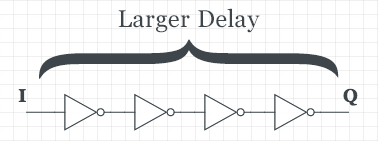
<style>
.page{position:relative;width:378px;height:141px;background:#ffffff}
.page>*{position:absolute;margin:0}
.t1{font:24px "Georgia";letter-spacing:0.02em;color:#3e464b}
.t2{font:322.1px "Helvetica-Light";letter-spacing:0.02em;color:#3e464b;scale:0.52 1}
</style>
<div class="page">
<p class="t1" style="left:118px;top:8px;width:142px;height:25px">Larger Delay</p>
<p class="t2" style="left:39px;top:39px;width:300px;height:40px;rotate:90deg">{</p>
</div>
